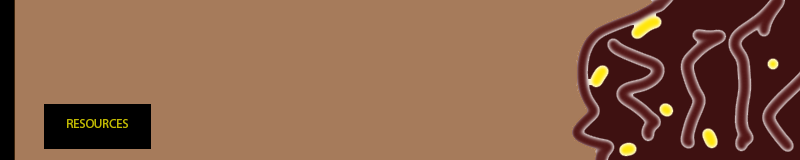
<style>
.page{position:relative;width:800px;height:160px;background:#a67b5b}
.page>*{position:absolute;margin:0}
.t1{font:12.5px "MyriadPro-Regular";color:#c1ba02}
</style>
<div class="page">
<p class="t1" style="left:67px;top:119px;width:61px;height:9px">RESOURCES</p>
</div>
